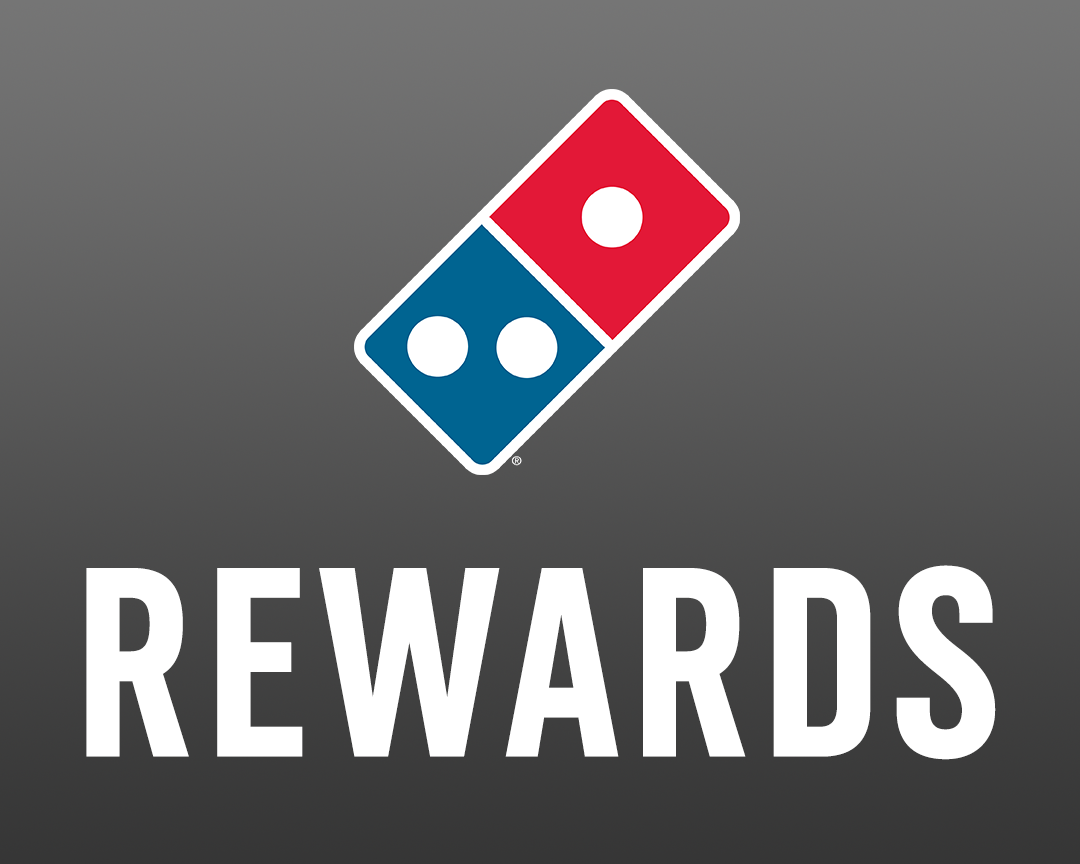
<style>
.page{position:relative;width:1080px;height:864px}
.page>*{position:absolute;margin:0}
.t1{font:259.2px "PizzaPress";color:#ffffff;font-weight:bold}
</style>
<div class="page">
<p class="t1" style="left:86px;top:565px;width:910px;height:195px">rewards</p>
</div>
